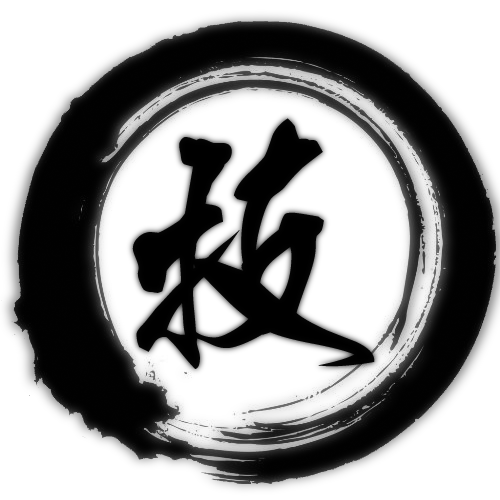
<style>
.page{position:relative;width:500px;height:500px;background:#ffffff}
.page>*{position:absolute;margin:0}
.t1{font:266.7px "Samurai";color:#000000}
</style>
<div class="page">
<p class="t1" style="left:132px;top:118px;width:243px;height:251px;opacity:0.95">技</p>
</div>
